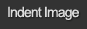
<style>
.page{position:relative;width:87px;height:29px;background:#333333}
.page>*{position:absolute;margin:0}
.t1{font:14px "ArialMT";letter-spacing:-0.06em;color:#dddddd}
</style>
<div class="page">
<p class="t1" style="left:8px;top:6px;width:71px;height:14px">Indent Image</p>
</div>
